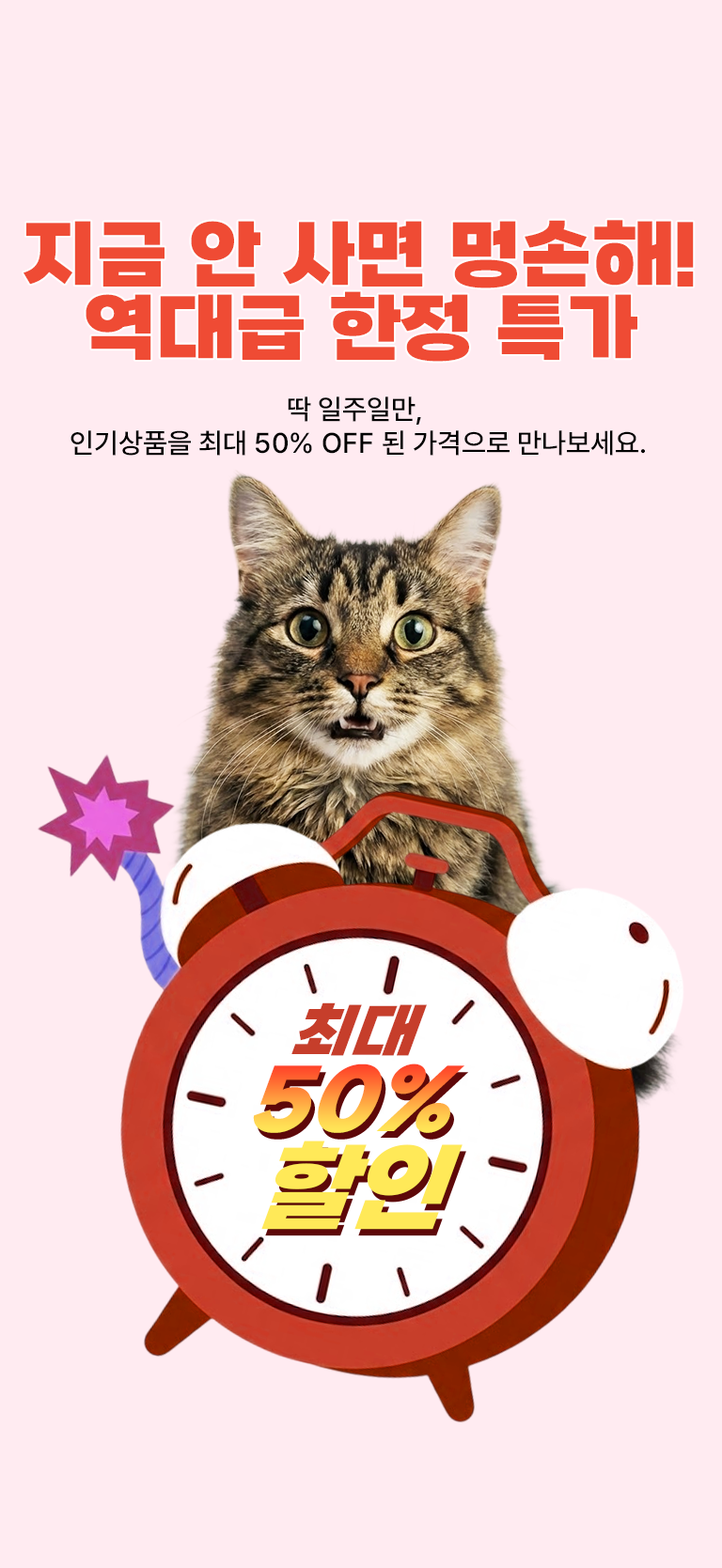
<style>
.page{position:relative;width:722px;height:1568px;background:#ffebf1}
.page>*{position:absolute;margin:0}
.t1{font:75.2px/73.3px "SBAggroB";color:#ef4b34;text-transform:uppercase}
.t2{font:28.2px "Pretendard-Medium";color:#000000;text-transform:uppercase}
.t3{font:63.7px "SBAggroB";color:#c63e2b;text-transform:uppercase;scale:0.94 1}
.t4{font:87.6px "SBAggroB";text-transform:uppercase;scale:0.94 1}
.t5{font:103.5px "SBAggroB";color:#ffe958;text-transform:uppercase;scale:0.94 1}
</style>
<div class="page">
<p class="t1" style="left:23px;top:220px;width:670px;height:142px;text-align:center">지금 안 사면 멍손해!<br>역대급 한정 특가</p>
<p class="t2" style="left:70px;top:396px;width:574px;height:60px;text-align:center">딱 일주일만, <br>인기상품을 최대 50% OFF 된 가격으로 만나보세요.</p>
<p class="t3" style="left:291px;top:1002px;width:136px;height:54px">최대</p>
<p class="t4" style="left:253px;top:1063px;width:211px;height:70px">50%</p>
<p class="t5" style="left:261px;top:1141px;width:201px;height:89px">할인</p>
</div>
